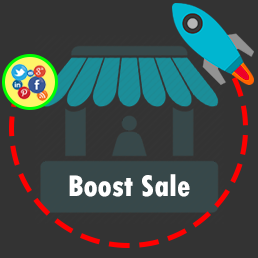
<style>
.page{position:relative;width:258px;height:258px;background:#333333}
.page>*{position:absolute;margin:0}
.t1{font:31.4px "TwCenMT-CondensedExtraBold";color:#ffffff}
</style>
<div class="page">
<p class="t1" style="left:69px;top:174px;width:121px;height:23px">Boost Sale</p>
</div>
